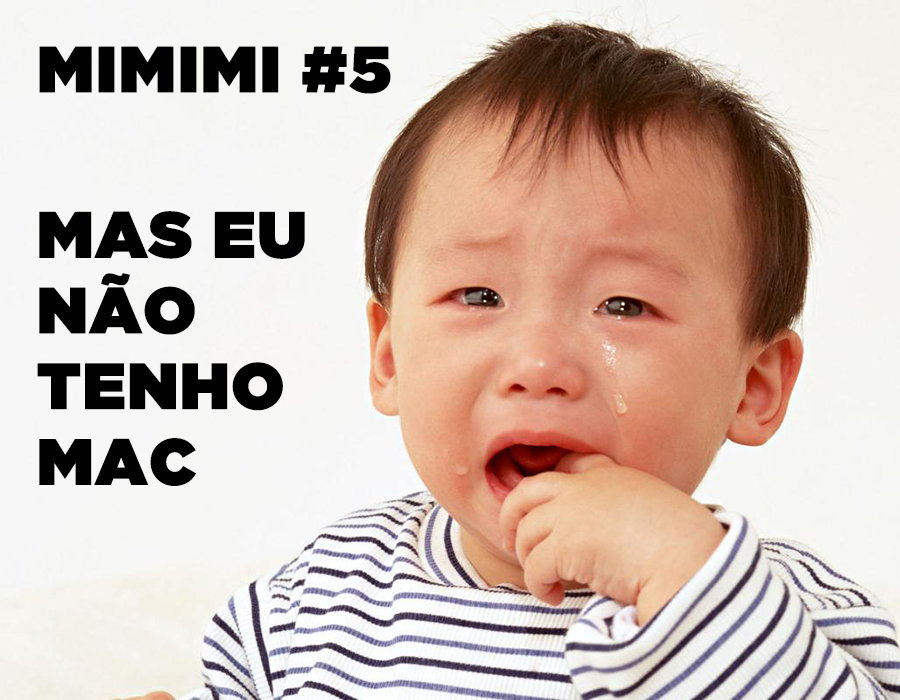
<style>
.page{position:relative;width:900px;height:700px}
.page>*{position:absolute;margin:0}
.t1{font:65.1px "GothamUltra";color:#000000;font-weight:bold}
.t2{font:65px/75.7px "GothamUltra";color:#000000;font-weight:bold}
</style>
<div class="page">
<p class="t1" style="left:39px;top:46px;width:352px;height:48px">MIMIMI #5</p>
<p class="t2" style="left:37px;top:211px;width:268px;height:275px">MAS EU<br>NÃO <br>TENHO<br>MAC</p>
</div>
